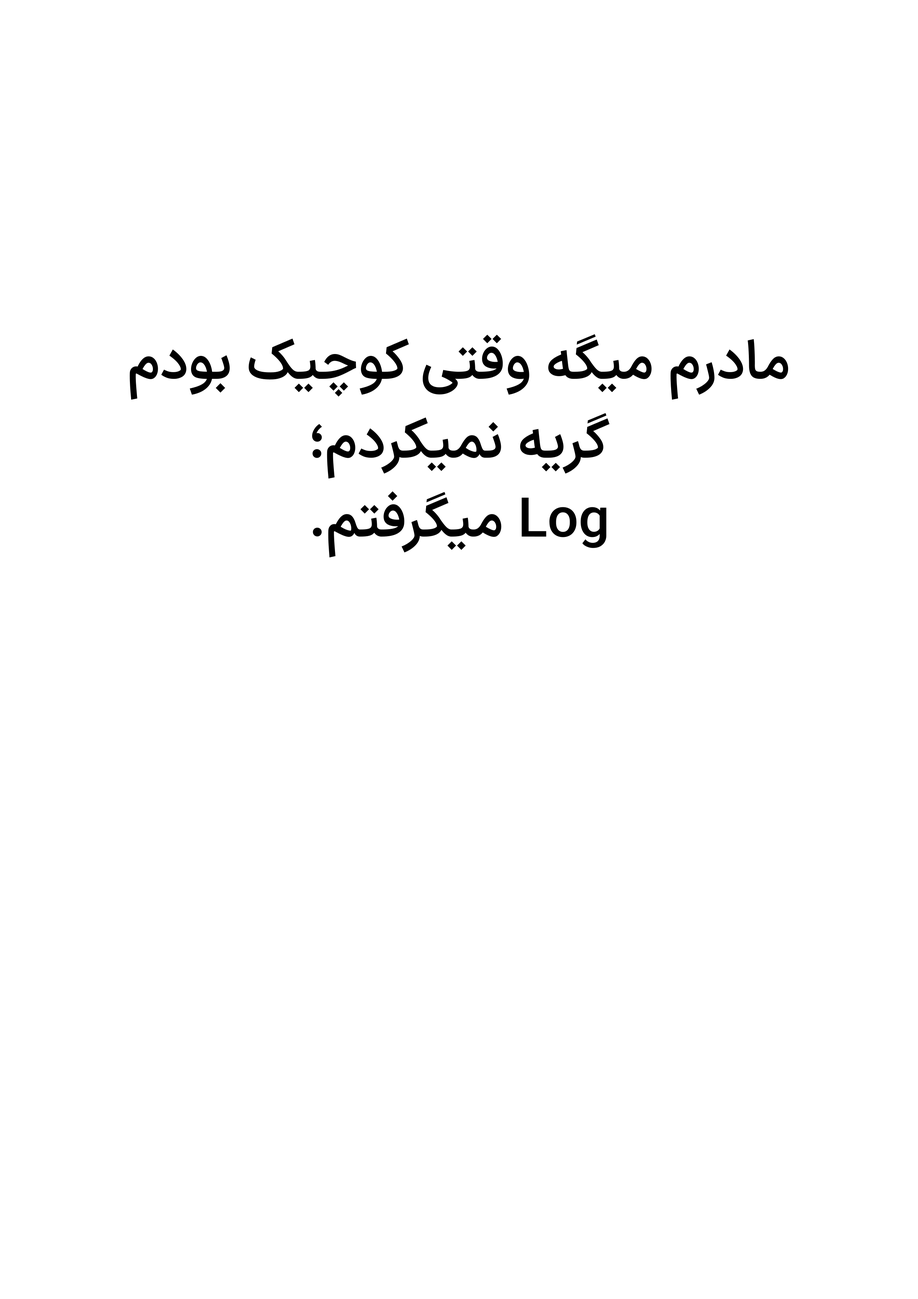
<style>
.page{position:relative;width:918px;height:1299px;background:#ffffff}
.page>*{position:absolute;margin:0}
.t1{font:54.7px/78.9px "IRANSansX-DemiBold";color:#000000}
</style>
<div class="page">
<p class="t1" style="left:130px;top:334px;width:659px;height:224px;text-align:center">مادرم میگه وقتی کوچیک بودم<br>گریه نمیکردم؛<br>Log میگرفتم.</p>
</div>
